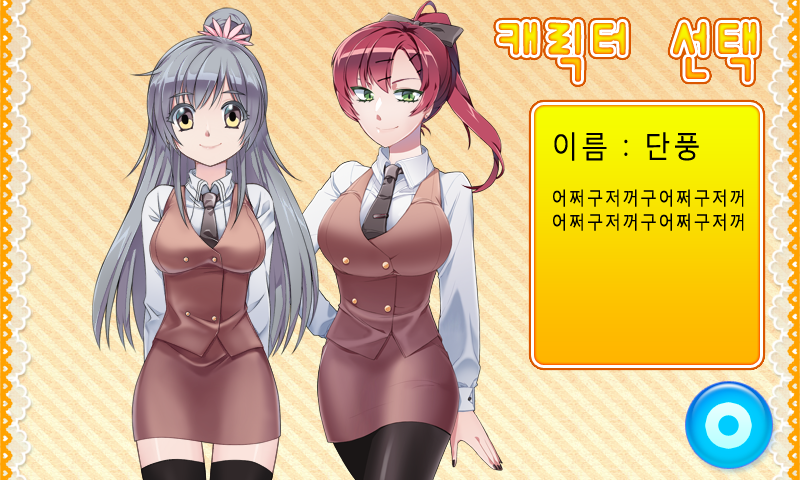
<style>
.page{position:relative;width:800px;height:480px}
.page>*{position:absolute;margin:0}
.t1{font:18px/24px "MalgunGothicRegular";letter-spacing:0.1em;color:#000000;scale:0.9 1}
.t2{font:30px/24px "MalgunGothicRegular";letter-spacing:0.1em;color:#000000;scale:0.9 1}
</style>
<div class="page">
<p class="t1" style="left:553px;top:132px;width:191px;height:99px"><span class="t2">이름 : 단풍<br></span><br>어쩌구저꺼구어쩌구저꺼<br>어쩌구저꺼구어쩌구저꺼</p>
</div>
